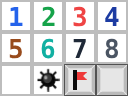
<style>
.page{position:relative;width:128px;height:96px;background:#ffffff}
.page>*{position:absolute;margin:0}
.t1{font:26px "DejaVuSansMono-Bold";color:#16a34a}
.t2{font:26px "DejaVuSansMono-Bold";color:#ef4444}
.t3{font:26px "DejaVuSansMono-Bold";color:#2563eb}
.t4{font:26px "DejaVuSansMono-Bold";color:#1c3ba2}
.t5{font:26px "DejaVuSansMono-Bold";color:#984b1c}
.t6{font:26px "DejaVuSansMono-Bold";color:#12b0a2}
.t7{font:26px "DejaVuSansMono-Bold";color:#1f2937}
.t8{font:26px "DejaVuSansMono-Bold";color:#4b5563}
</style>
<div class="page">
<p class="t1" style="left:42px;top:6px;width:13px;height:20px">2</p>
<p class="t2" style="left:73px;top:6px;width:13px;height:21px">3</p>
<p class="t3" style="left:10px;top:7px;width:13px;height:19px">1</p>
<p class="t4" style="left:105px;top:7px;width:14px;height:19px">4</p>
<p class="t5" style="left:9px;top:39px;width:13px;height:20px">5</p>
<p class="t6" style="left:41px;top:38px;width:14px;height:21px">6</p>
<p class="t7" style="left:73px;top:39px;width:13px;height:19px">7</p>
<p class="t8" style="left:105px;top:38px;width:14px;height:21px">8</p>
</div>
